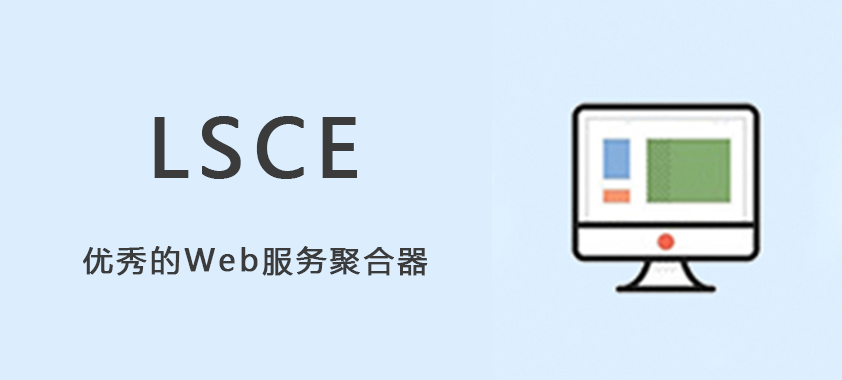
<style>
.page{position:relative;width:842px;height:380px;background:#dceefe}
.page>*{position:absolute;margin:0}
.t1{font:78.7px "MicrosoftYaHei";letter-spacing:0.1em;color:#3b3b3b;font-weight:bold}
.t2{font:30px "MicrosoftYaHei";letter-spacing:0.1em;color:#3b3b3b;font-weight:bold}
</style>
<div class="page">
<p class="t1" style="left:154px;top:116px;width:203px;height:63px">LSCE</p>
<p class="t2" style="left:83px;top:246px;width:345px;height:30px">优秀的Web服务聚合器</p>
</div>
